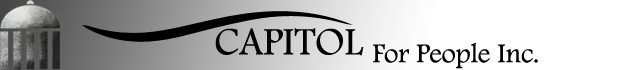
<style>
.page{position:relative;width:623px;height:70px;background:#ffffff}
.page>*{position:absolute;margin:0}
.t1{font:40px "FootlightMTLight";color:#000000}
.t2{font:28px "FootlightMTLight";color:#000000}
</style>
<div class="page">
<p class="t1" style="left:215px;top:28px;width:149px;height:28px">CAPITOL</p>
<p class="t2" style="left:373px;top:42px;width:165px;height:27px">For People Inc.</p>
</div>
